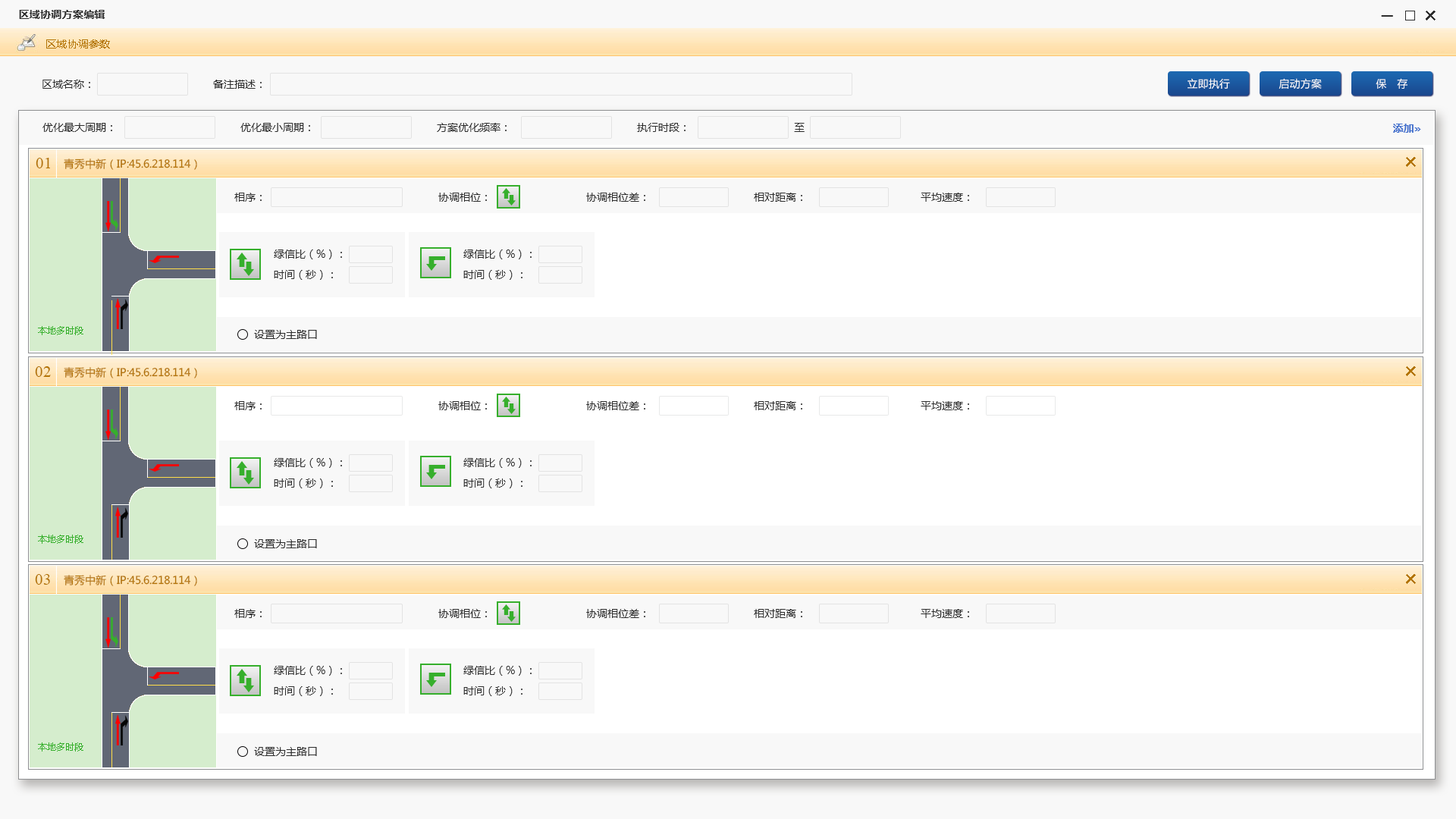
<style>
.page{position:relative;width:1456px;height:819px;background:#ffffff}
.page>*{position:absolute;margin:0}
.t1{font:10.6px "MicrosoftYaHei-Bold";letter-spacing:0.02em;color:#2d2d2d}
.t2{font:24.3px "MicrosoftYaHei";letter-spacing:0.02em;color:#2d2d2d}
.t3{font:10.3px "MicrosoftYaHei";letter-spacing:0.02em;color:#b37405}
.t4{font:10.6px "MicrosoftYaHei";color:#2d2d2d}
.t5{font:10.4px "MicrosoftYaHei";letter-spacing:0.04em;color:#ffffff}
.t6{font:10.6px "MicrosoftYaHei-Bold";letter-spacing:0.02em;color:#3d6dcc}
.t7{font:15.8px "TimesNewRomanPSMT";color:#b37405}
.t8{font:10.6px "MicrosoftYaHei";color:#b37405}
.t9{font:24.3px "MicrosoftYaHei";letter-spacing:0.02em;color:#b37405}
.t10{font:9.1px "MicrosoftYaHei";color:#36af2c}
</style>
<div class="page">
<p class="t1" style="left:19px;top:10px;width:86px;height:9px">区域协调方案编辑</p>
<p class="t1" style="left:1381px;top:15px;width:12px;height:2px">—</p>
<p class="t2" style="left:1426px;top:11px;width:10px;height:9px;rotate:-45deg">+</p>
<p class="t3" style="left:46px;top:39px;width:64px;height:10px">区域协调参数</p>
<p class="t4" style="left:42px;top:80px;width:48px;height:9px">区域名称：</p>
<p class="t4" style="left:213px;top:80px;width:49px;height:9px">备注描述：</p>
<p class="t5" style="left:1188px;top:78px;width:42px;height:11px">立即执行</p>
<p class="t5" style="left:1279px;top:78px;width:43px;height:11px">启动方案</p>
<p class="t5" style="left:1376px;top:78px;width:31px;height:11px">保   存</p>
<p class="t4" style="left:42px;top:123px;width:70px;height:9px">优化最大周期：</p>
<p class="t4" style="left:240px;top:123px;width:70px;height:9px">优化最小周期：</p>
<p class="t4" style="left:437px;top:123px;width:70px;height:9px">方案优化频率：</p>
<p class="t4" style="left:637px;top:123px;width:49px;height:9px">执行时段：</p>
<p class="t4" style="left:794px;top:123px;width:11px;height:9px">至</p>
<p class="t6" style="left:1393px;top:124px;width:28px;height:9px">添加»</p>
<p class="t7" style="left:36px;top:158px;width:14px;height:10px">01</p>
<p class="t8" style="left:64px;top:158px;width:133px;height:12px">青秀中新（IP:45.6.218.114）</p>
<p class="t9" style="left:1406px;top:157px;width:10px;height:10px;rotate:-45deg">+</p>
<p class="t4" style="left:234px;top:193px;width:28px;height:9px">相序：</p>
<p class="t4" style="left:438px;top:193px;width:49px;height:9px">协调相位：</p>
<p class="t4" style="left:586px;top:193px;width:59px;height:9px">协调相位差：</p>
<p class="t4" style="left:754px;top:193px;width:48px;height:9px">相对距离：</p>
<p class="t4" style="left:921px;top:193px;width:48px;height:9px">平均速度：</p>
<p class="t4" style="left:274px;top:249px;width:68px;height:10px">绿信比（%）：</p>
<p class="t4" style="left:463px;top:249px;width:69px;height:10px">绿信比（%）：</p>
<p class="t4" style="left:274px;top:270px;width:59px;height:10px">时间（秒）：</p>
<p class="t4" style="left:463px;top:270px;width:59px;height:10px">时间（秒）：</p>
<p class="t10" style="left:38px;top:326px;width:45px;height:9px">本地多时段</p>
<p class="t4" style="left:254px;top:330px;width:63px;height:9px">设置为主路口</p>
<p class="t7" style="left:35px;top:366px;width:16px;height:11px">02</p>
<p class="t8" style="left:64px;top:367px;width:133px;height:11px">青秀中新（IP:45.6.218.114）</p>
<p class="t9" style="left:1406px;top:366px;width:10px;height:10px;rotate:-45deg">+</p>
<p class="t4" style="left:234px;top:401px;width:28px;height:9px">相序：</p>
<p class="t4" style="left:438px;top:401px;width:49px;height:9px">协调相位：</p>
<p class="t4" style="left:586px;top:401px;width:59px;height:9px">协调相位差：</p>
<p class="t4" style="left:754px;top:401px;width:48px;height:9px">相对距离：</p>
<p class="t4" style="left:921px;top:401px;width:48px;height:9px">平均速度：</p>
<p class="t4" style="left:274px;top:458px;width:68px;height:10px">绿信比（%）：</p>
<p class="t4" style="left:463px;top:458px;width:69px;height:10px">绿信比（%）：</p>
<p class="t4" style="left:274px;top:479px;width:59px;height:9px">时间（秒）：</p>
<p class="t4" style="left:463px;top:479px;width:59px;height:9px">时间（秒）：</p>
<p class="t10" style="left:38px;top:535px;width:45px;height:9px">本地多时段</p>
<p class="t4" style="left:254px;top:539px;width:63px;height:9px">设置为主路口</p>
<p class="t7" style="left:35px;top:574px;width:15px;height:11px">03</p>
<p class="t8" style="left:64px;top:575px;width:133px;height:11px">青秀中新（IP:45.6.218.114）</p>
<p class="t9" style="left:1406px;top:574px;width:10px;height:10px;rotate:-45deg">+</p>
<p class="t4" style="left:234px;top:609px;width:28px;height:9px">相序：</p>
<p class="t4" style="left:438px;top:609px;width:49px;height:9px">协调相位：</p>
<p class="t4" style="left:586px;top:609px;width:59px;height:9px">协调相位差：</p>
<p class="t4" style="left:754px;top:609px;width:48px;height:9px">相对距离：</p>
<p class="t4" style="left:921px;top:609px;width:48px;height:9px">平均速度：</p>
<p class="t4" style="left:274px;top:666px;width:68px;height:10px">绿信比（%）：</p>
<p class="t4" style="left:463px;top:666px;width:69px;height:10px">绿信比（%）：</p>
<p class="t4" style="left:274px;top:686px;width:59px;height:10px">时间（秒）：</p>
<p class="t4" style="left:463px;top:686px;width:59px;height:10px">时间（秒）：</p>
<p class="t10" style="left:38px;top:742px;width:45px;height:9px">本地多时段</p>
<p class="t4" style="left:254px;top:747px;width:63px;height:9px">设置为主路口</p>
</div>
